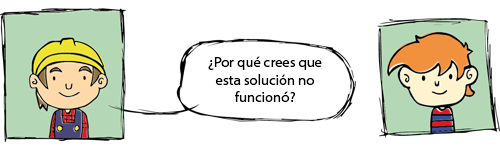
<style>
.page{position:relative;width:500px;height:150px;background:#ffffff}
.page>*{position:absolute;margin:0}
.t1{font:14.6px "MyriadHebrew-Regular";color:#000000}
</style>
<div class="page">
<p class="t1" style="left:208px;top:56px;width:114px;height:46px;text-align:center">¿Por qué crees que esta solución no funcionó?</p>
</div>
